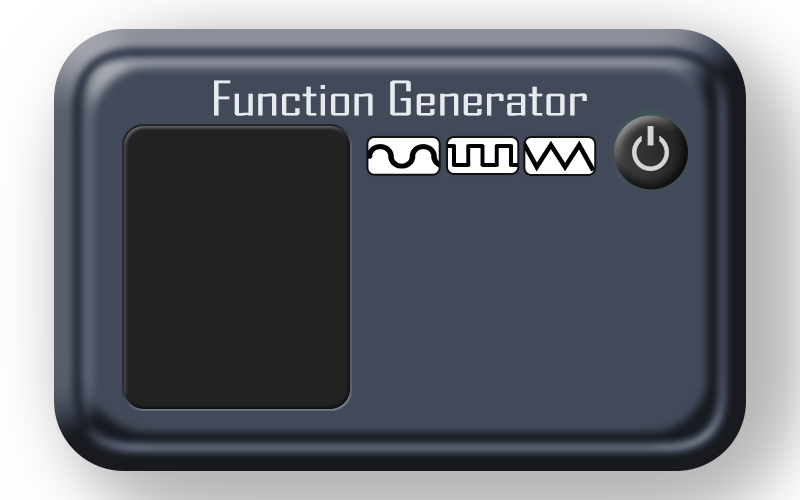
<style>
.page{position:relative;width:800px;height:500px;background:#424959}
.page>*{position:absolute;margin:0}
.t1{font:45.8px "AgencyFB-Reg";letter-spacing:-0.02em;color:#e7ebf0;scale:1.44 1}
</style>
<div class="page">
<p class="t1" style="left:214px;top:80px;width:373px;height:36px">Function Generator</p>
</div>
